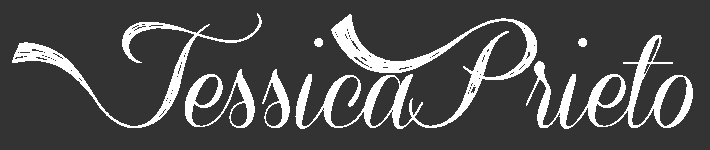
<style>
.page{position:relative;width:710px;height:150px;background:#333333}
.page>*{position:absolute;margin:0}
.t1{font:102.5px "AdmirationPains";color:#ffffff}
.t2{font:102.5px "ConeriaScriptDemo";color:#ffffff}
</style>
<div class="page">
<p class="t1" style="left:12px;top:13px;width:250px;height:115px">J</p>
<p class="t1" style="left:331px;top:14px;width:206px;height:114px">P</p>
<p class="t2" style="left:185px;top:38px;width:238px;height:91px">essica</p>
<p class="t2" style="left:526px;top:35px;width:167px;height:94px">rieto</p>
</div>
